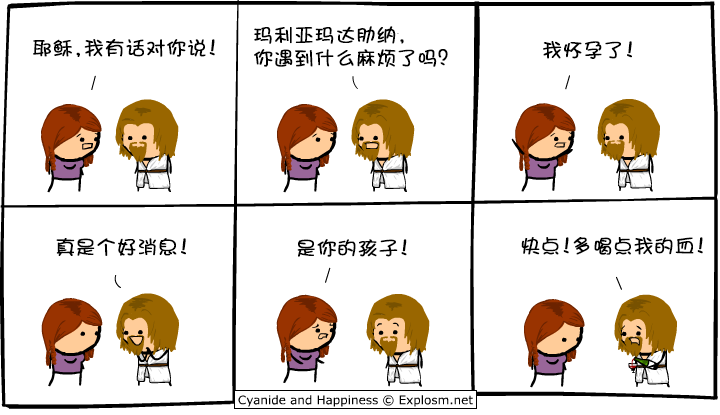
<style>
.page{position:relative;width:720px;height:415px;background:#ffffff}
.page>*{position:absolute;margin:0}
.t1{font:20px/23px "DFShaoNvW5";color:#000000;font-weight:bold}
.t2{font:20px "DFShaoNvW5";color:#000000;font-weight:bold}
</style>
<div class="page">
<p class="t1" style="left:254px;top:26px;width:194px;height:41px">玛利亚玛达肋纳，<br>你遇到什么麻烦了吗？</p>
<p class="t2" style="left:33px;top:39px;width:182px;height:18px">耶稣,我有话对你说!</p>
<p class="t2" style="left:543px;top:41px;width:89px;height:18px">我怀孕了!</p>
<p class="t2" style="left:56px;top:238px;width:130px;height:18px">真是个好消息!</p>
<p class="t2" style="left:297px;top:239px;width:110px;height:18px">是你的孩子!</p>
<p class="t2" style="left:521px;top:237px;width:182px;height:18px">快点!多喝点我的血!</p>
</div>
